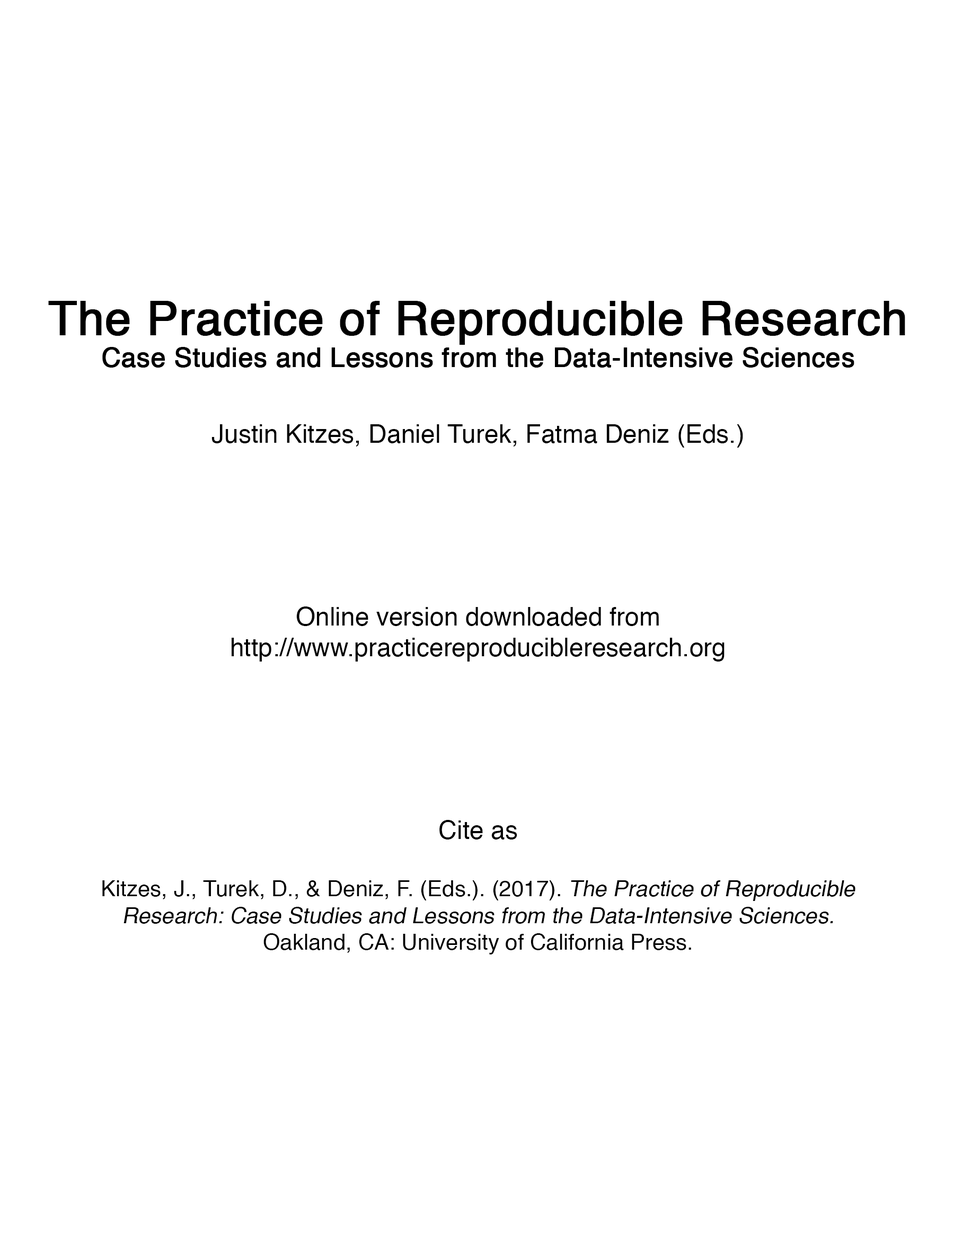
<style>
.page{position:relative;width:954px;height:1250px;background:#ffffff}
.page>*{position:absolute;margin:0}
.t1{font:25.4px "Helvetica";color:#000000}
.t2{font:46.6px "Helvetica";color:#000000;font-weight:bold}
.t3{font:26.5px "Helvetica";color:#000000;font-weight:bold}
.t4{font:22.3px "Helvetica";color:#000000}
.t5{font:22.3px "Helvetica";color:#000000;font-style:italic}
</style>
<div class="page">
<p class="t1" style="left:48px;top:301px;width:857px;height:654px;text-align:center"><span class="t2">The Practice of Reproducible Research<br></span><span class="t3">Case Studies and Lessons from the Data-Intensive Sciences<br><br></span>Justin Kitzes, Daniel Turek, Fatma Deniz (Eds.)<br><br><br><br><br><br>Online version downloaded from<br>http://www.practicereproducibleresearch.org<br><br><br><br><br><br>Cite as<br><br><span class="t4">Kitzes, J., Turek, D., &amp; Deniz, F. (Eds.). (2017). </span><span class="t5">The Practice of Reproducible<br>Research: Case Studies and Lessons from the Data-Intensive Sciences.<br></span><span class="t4">Oakland, CA: University of California Press.</span></p>
</div>
